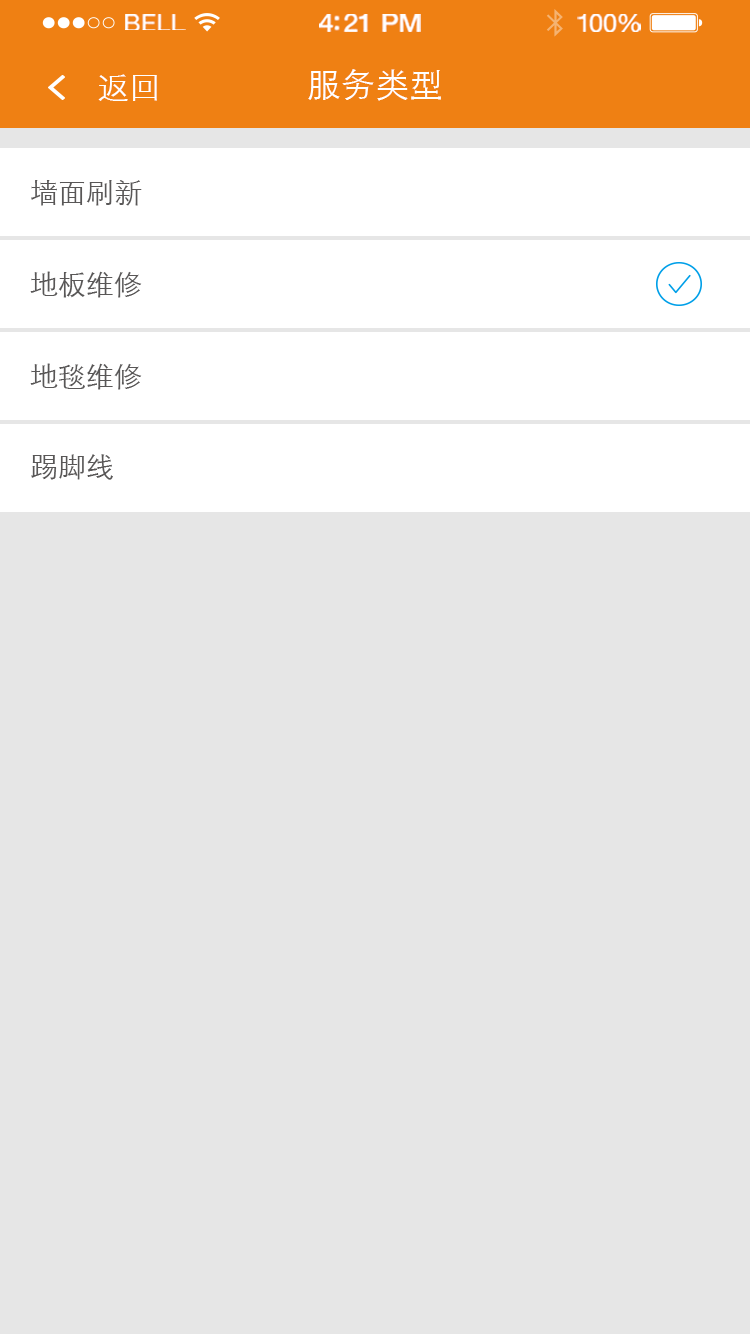
<style>
.page{position:relative;width:750px;height:1334px;background:#e6e6e6}
.page>*{position:absolute;margin:0}
.t1{font:23.3px "HelveticaNeue";letter-spacing:0.02em;color:#ffffff;scale:1.06 1}
.t2{font:25.3px "HelveticaNeue-Medium";letter-spacing:-0.02em;color:#ffffff;scale:1.06 1}
.t3{font:24.3px "HelveticaNeue";letter-spacing:-0.02em;color:#ffffff;scale:1.06 1}
.t4{font:32px "STXihei";color:#ffffff}
.t5{font:34px "STXihei";color:#ffffff}
.t6{font:28px "STXihei";color:#595757}
</style>
<div class="page">
<p class="t1" style="left:125px;top:14px;width:61px;height:16px">BELL</p>
<p class="t2" style="left:319px;top:14px;width:102px;height:18px">4:21 PM</p>
<p class="t3" style="left:577px;top:14px;width:64px;height:18px">100%</p>
<p class="t4" style="left:98px;top:74px;width:59px;height:27px">返回</p>
<p class="t5" style="left:308px;top:69px;width:133px;height:32px">服务类型</p>
<p class="t6" style="left:31px;top:180px;width:111px;height:26px">墙面刷新</p>
<p class="t6" style="left:30px;top:271px;width:112px;height:27px">地板维修</p>
<p class="t6" style="left:30px;top:363px;width:112px;height:27px">地毯维修</p>
<p class="t6" style="left:31px;top:454px;width:82px;height:26px">踢脚线</p>
</div>
